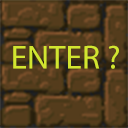
<style>
.page{position:relative;width:128px;height:128px}
.page>*{position:absolute;margin:0}
.t1{font:33.3px "MyriadPro-Regular";color:#d2e530}
</style>
<div class="page">
<p class="t1" style="left:13px;top:45px;width:106px;height:24px">ENTER ?</p>
</div>
